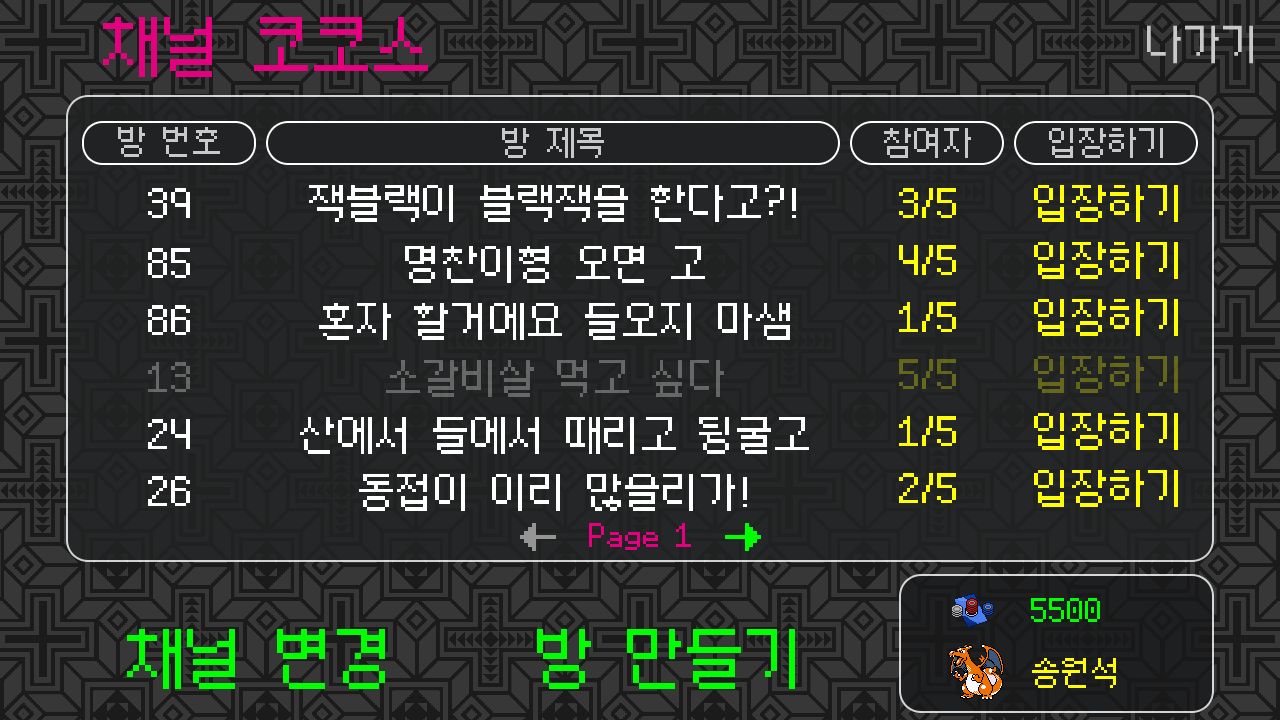
<style>
.page{position:relative;width:1280px;height:720px;background:#252627}
.page>*{position:absolute;margin:0}
.t1{font:64px "soya_non8";color:#e4007f}
.t2{font:32px "soya_non8";color:#c9c9c9}
.t3{font:40px "soya_non8";color:#ffffff}
.t4{font:40px "soya_non8";color:#ffff00}
.t5{font:40px "soya_non8";color:#676868}
.t6{font:40px "soya_non8";color:#67681b}
.t7{font:32px "soya_non8";color:#e4007f}
.t8{font:32px "soya_non8";color:#00ff00}
.t9{font:64px "soya_non8";color:#00ff00}
.t10{font:32px "soya_non8";color:#ffff00}
</style>
<div class="page">
<p class="t1" style="left:103px;top:17px;width:325px;height:60px">채널 코코스</p>
<p class="t2" style="left:118px;top:127px;width:102px;height:30px">방 번호</p>
<p class="t2" style="left:502px;top:128px;width:102px;height:30px">방 제목</p>
<p class="t2" style="left:884px;top:128px;width:87px;height:30px">참여자</p>
<p class="t2" style="left:1049px;top:128px;width:114px;height:30px">입장하기</p>
<p class="t3" style="left:309px;top:185px;width:487px;height:37px">잭블랙이 블랙잭을 한다고?!</p>
<p class="t4" style="left:1034px;top:185px;width:144px;height:37px">입장하기</p>
<p class="t3" style="left:148px;top:188px;width:42px;height:30px">39</p>
<p class="t4" style="left:899px;top:188px;width:57px;height:30px">3/5</p>
<p class="t3" style="left:405px;top:246px;width:300px;height:37px">명찬이형 오면 고</p>
<p class="t4" style="left:899px;top:245px;width:57px;height:30px">4/5</p>
<p class="t4" style="left:1034px;top:242px;width:144px;height:37px">입장하기</p>
<p class="t3" style="left:148px;top:248px;width:42px;height:30px">85</p>
<p class="t3" style="left:148px;top:305px;width:42px;height:30px">86</p>
<p class="t3" style="left:319px;top:303px;width:471px;height:37px">혼자 할거에요 들오지 마샘</p>
<p class="t4" style="left:899px;top:302px;width:57px;height:30px">1/5</p>
<p class="t4" style="left:1034px;top:299px;width:144px;height:37px">입장하기</p>
<p class="t5" style="left:148px;top:362px;width:42px;height:30px">13</p>
<p class="t5" style="left:386px;top:360px;width:338px;height:37px">소갈비살 먹고 싶다</p>
<p class="t6" style="left:899px;top:359px;width:57px;height:30px">5/5</p>
<p class="t6" style="left:1034px;top:356px;width:144px;height:37px">입장하기</p>
<p class="t4" style="left:1034px;top:413px;width:144px;height:37px">입장하기</p>
<p class="t3" style="left:148px;top:419px;width:42px;height:30px">24</p>
<p class="t3" style="left:300px;top:417px;width:509px;height:37px">산에서 들에서 때리고 뒹굴고</p>
<p class="t4" style="left:899px;top:416px;width:57px;height:30px">1/5</p>
<p class="t4" style="left:899px;top:473px;width:57px;height:30px">2/5</p>
<p class="t4" style="left:1034px;top:470px;width:144px;height:37px">입장하기</p>
<p class="t3" style="left:148px;top:476px;width:42px;height:30px">26</p>
<p class="t3" style="left:359px;top:474px;width:388px;height:37px">동접이 이리 많을리가!</p>
<p class="t7" style="left:589px;top:523px;width:102px;height:27px">Page 1</p>
<p class="t8" style="left:1031px;top:598px;width:69px;height:24px">5500</p>
<p class="t9" style="left:127px;top:629px;width:258px;height:60px">채널 변경</p>
<p class="t9" style="left:537px;top:629px;width:258px;height:60px">방 만들기</p>
<p class="t10" style="left:1032px;top:658px;width:84px;height:30px">송원석</p>
</div>
